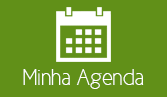
<style>
.page{position:relative;width:167px;height:97px;background:#619018}
.page>*{position:absolute;margin:0}
.t1{font:22.7px "CicleFina";color:#ffffff}
</style>
<div class="page">
<p class="t1" style="left:23px;top:69px;width:121px;height:20px">Minha Agenda</p>
</div>
